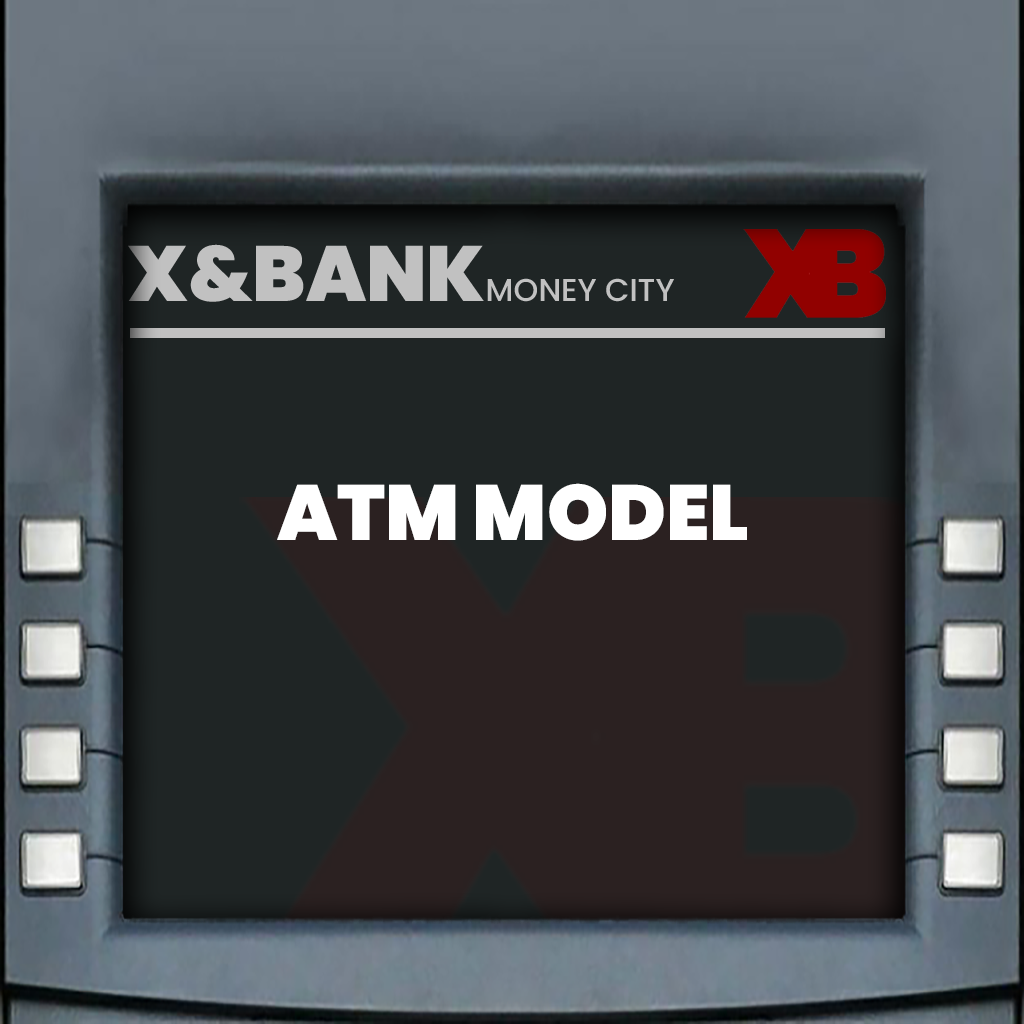
<style>
.page{position:relative;width:1024px;height:1024px;background:#1f2525}
.page>*{position:absolute;margin:0}
.t1{font:77.9px "Poppins-Black";color:#c1c1c1}
.t2{font:31.6px "Poppins-Medium";color:#c1c1c1}
.t3{font:78px "Poppins-Black";color:#ffffff}
</style>
<div class="page">
<p class="t1" style="left:128px;top:244px;width:356px;height:58px">X&amp;BANK</p>
<p class="t2" style="left:487px;top:278px;width:187px;height:24px">MONEY CITY</p>
<p class="t3" style="left:277px;top:483px;width:470px;height:58px">ATM MODEL</p>
</div>
